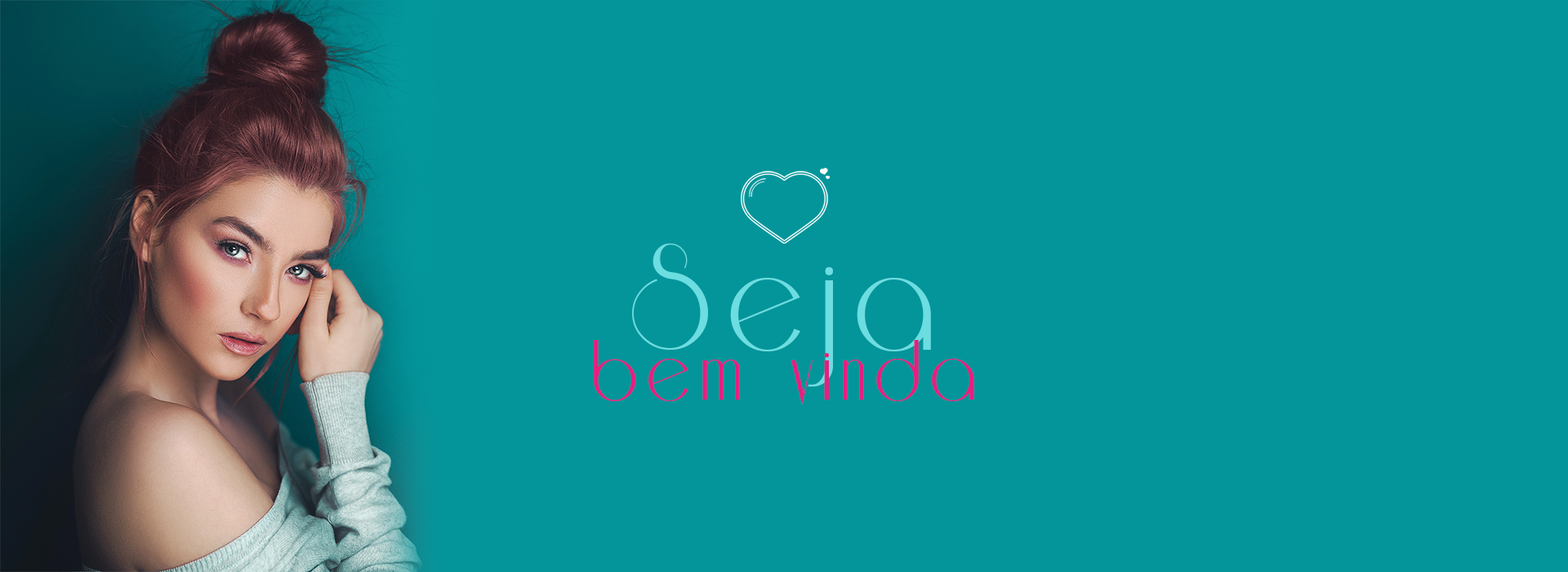
<style>
.page{position:relative;width:1568px;height:572px;background:#03959a}
.page>*{position:absolute;margin:0}
.t1{font:171.5px "Riesling";letter-spacing:0.1em;color:#6cdde1}
.t2{font:98px "Riesling";letter-spacing:0.1em;color:#e51f80}
</style>
<div class="page">
<p class="t1" style="left:632px;top:243px;width:299px;height:143px">Seja</p>
<p class="t2" style="left:594px;top:340px;width:380px;height:64px">bem vinda</p>
</div>
